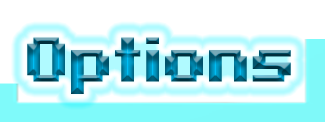
<style>
.page{position:relative;width:325px;height:122px;background:#ffffff}
.page>*{position:absolute;margin:0}
.t1{font:56.4px "Retro-Land-Mayhem"}
</style>
<div class="page">
<p class="t1" style="left:27px;top:37px;width:264px;height:57px">Options</p>
</div>
